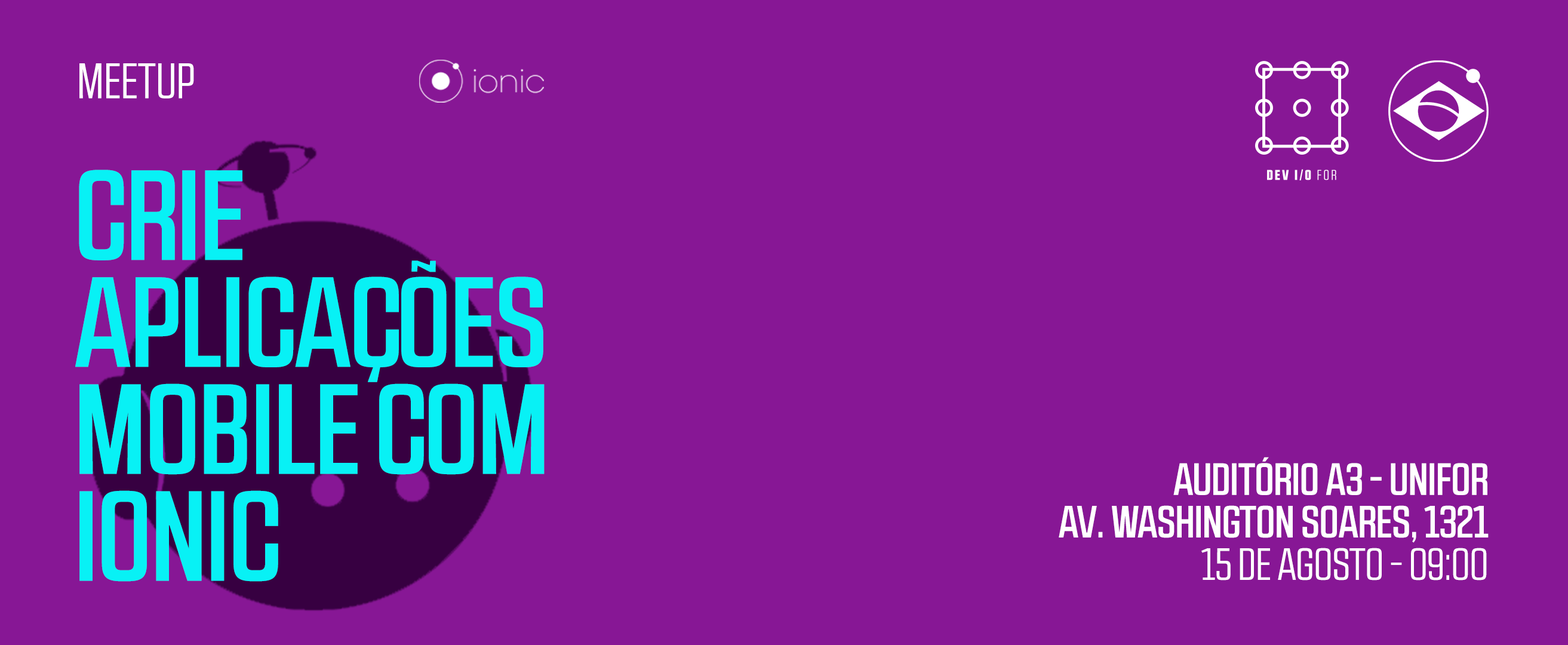
<style>
.page{position:relative;width:1568px;height:645px;background:#871795}
.page>*{position:absolute;margin:0}
.t1{font:49.9px "RBNo2.1a-Book";color:#ffffff;text-transform:uppercase}
.t2{font:127.8px/107px "RBNo2.1a-Medium";color:#08f1f5;text-transform:uppercase}
.t3{font:45.3px/42.5px "RBNo2.1a-Medium";color:#ffffff;text-transform:uppercase}
.t4{font:45.3px/42.5px "RBNo2.1a-Book";color:#ffffff;text-transform:uppercase}
</style>
<div class="page">
<p class="t1" style="left:79px;top:63px;width:115px;height:36px">meetup</p>
<p class="t2" style="left:75px;top:170px;width:470px;height:412px">CRIE <br>APLICAÇÕES <br>MOBILE com<br>ionic</p>
<p class="t3" style="left:1059px;top:457px;width:430px;height:123px;text-align:right">AUDITÓRIO A3 - UNIFOR<br>AV. WASHINGTON SOARES, 1321<br><span class="t4">15 DE AGOSTO - 09:00</span></p>
</div>
